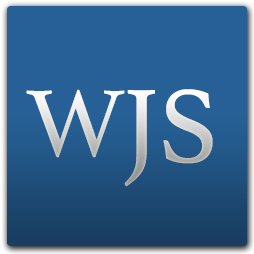
<style>
.page{position:relative;width:254px;height:254px;background:#266096}
.page>*{position:absolute;margin:0}
.t1{font:110px "Athelas-Regular";letter-spacing:-0.025em}
.t2{font:100px "Athelas-Regular";letter-spacing:-0.025em}
</style>
<div class="page">
<p class="t1" style="left:26px;top:89px;width:187px;height:98px"><span class="t2">W</span>JS</p>
</div>
